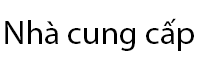
<style>
.page{position:relative;width:200px;height:70px;background:#ffffff}
.page>*{position:absolute;margin:0}
.t1{font:32.9px "MyriadPro-Regular";color:#000000}
</style>
<div class="page">
<p class="t1" style="left:5px;top:18px;width:189px;height:33px">Nhà cung cấp</p>
</div>
